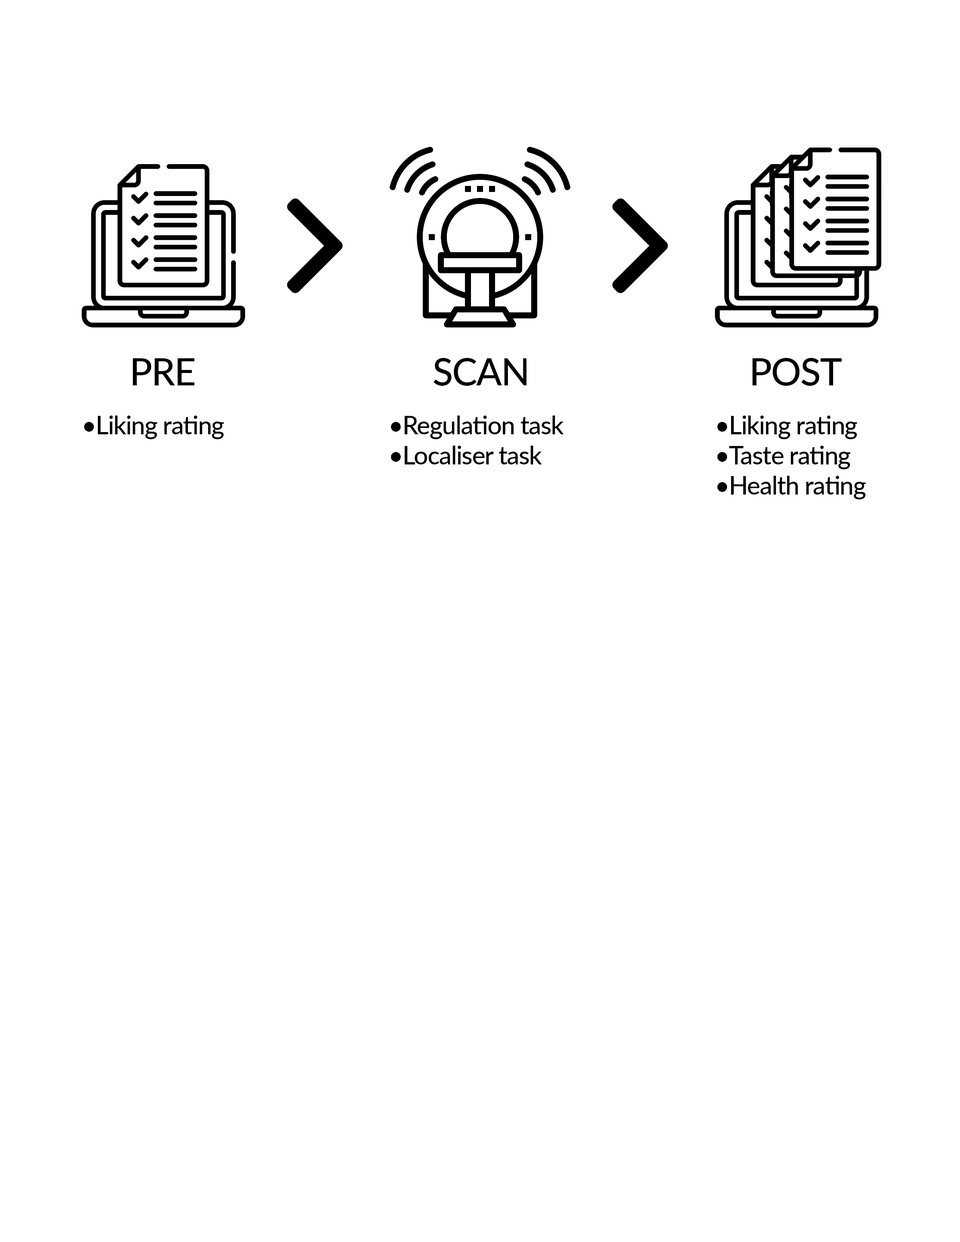
<style>
.page{position:relative;width:960px;height:1242px;background:#ffffff}
.page>*{position:absolute;margin:0}
.t1{font:37.6px "Lato-Medium";letter-spacing:-0.025em;color:#000000}
.t2{font:25.1px "Lato-Medium";letter-spacing:-0.025em;color:#000000}
</style>
<div class="page">
<p class="t1" style="left:133px;top:358px;width:62px;height:27px">PRE</p>
<p class="t1" style="left:434px;top:358px;width:93px;height:28px">SCAN</p>
<p class="t1" style="left:752px;top:358px;width:90px;height:28px">POST</p>
<p class="t2" style="left:84px;top:416px;width:140px;height:23px">•Liking rating</p>
<p class="t2" style="left:391px;top:416px;width:173px;height:49px">•Regulation task<br>•Localiser task</p>
<p class="t2" style="left:717px;top:416px;width:149px;height:84px">•Liking rating<br>•Taste rating<br>•Health rating</p>
</div>
